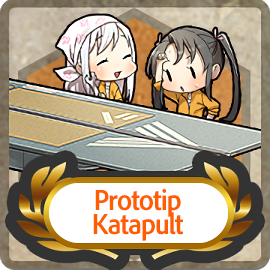
<style>
.page{position:relative;width:270px;height:270px}
.page>*{position:absolute;margin:0}
.t1{font:30px/24px "AdobeClean-Bold";letter-spacing:-0.04em;color:#ff5d00;scale:0.9 1}
</style>
<div class="page">
<p class="t1" style="left:93px;top:188px;width:90px;height:53px;text-align:center">Prototip<br>Katapult</p>
</div>
